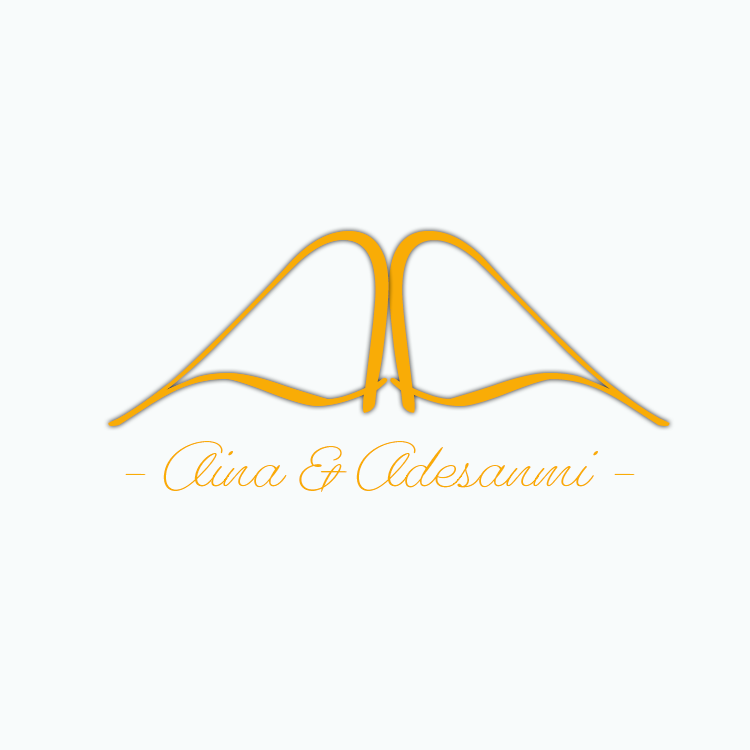
<style>
.page{position:relative;width:750px;height:750px;background:#f8fbfb}
.page>*{position:absolute;margin:0}
.t1{font:250px "Liana";color:#f9ac06}
.t2{font:60px "Gautreaux-Light";color:#f9ac06}
</style>
<div class="page">
<p class="t1" style="left:108px;top:231px;width:281px;height:195px">A</p>
<p class="t1" style="left:389px;top:231px;width:281px;height:195px;rotate:180deg">A</p>
<p class="t2" style="left:125px;top:441px;width:510px;height:51px">- Aina &amp; Adesanmi -</p>
</div>
